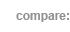
<style>
.page{position:relative;width:70px;height:32px;background:#ffffff}
.page>*{position:absolute;margin:0}
.t1{font:12px "Arial-BoldMT";color:#909090}
</style>
<div class="page">
<p class="t1" style="left:16px;top:13px;width:53px;height:9px">compare:</p>
</div>
